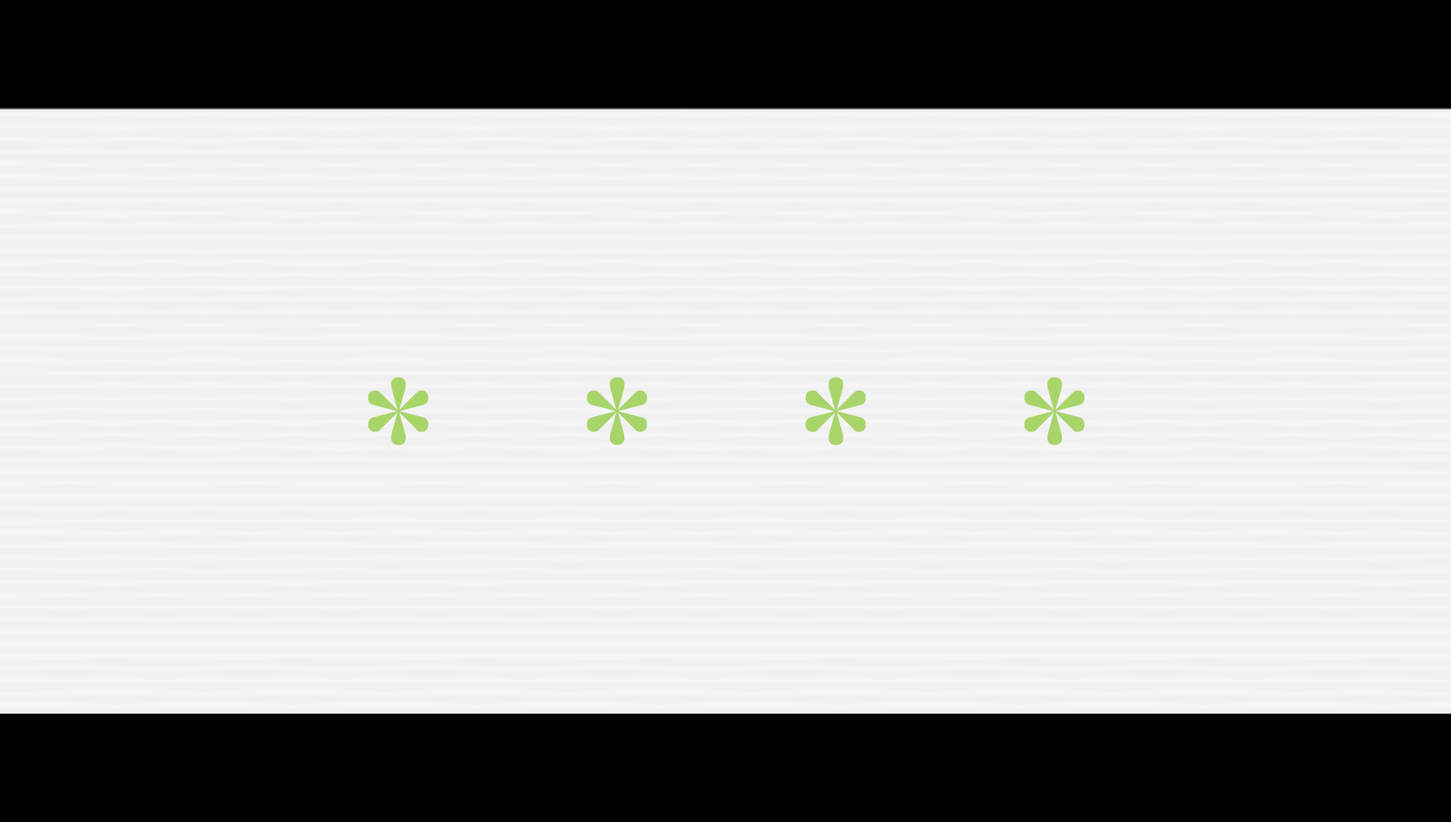
<style>
.page{position:relative;width:1451px;height:822px;background:#f0f0f0}
.page>*{position:absolute;margin:0}
.t1{font:108.8px "HGMinchoB";letter-spacing:1.01em;color:#a8d569}
</style>
<div class="page">
<p class="t1" style="left:368px;top:377px;width:716px;height:68px">＊＊＊＊</p>
</div>
